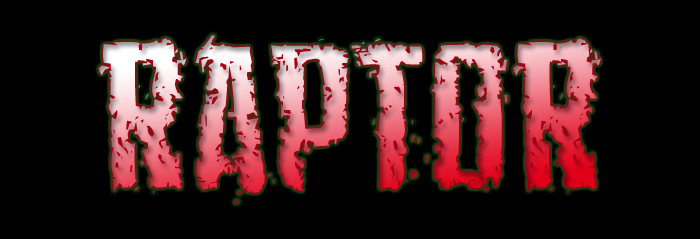
<style>
.page{position:relative;width:700px;height:239px;background:#000000}
.page>*{position:absolute;margin:0}
.t1{font:200px "DemonSker"}
</style>
<div class="page">
<p class="t1" style="left:98px;top:35px;width:503px;height:169px">rAPTOr</p>
</div>
